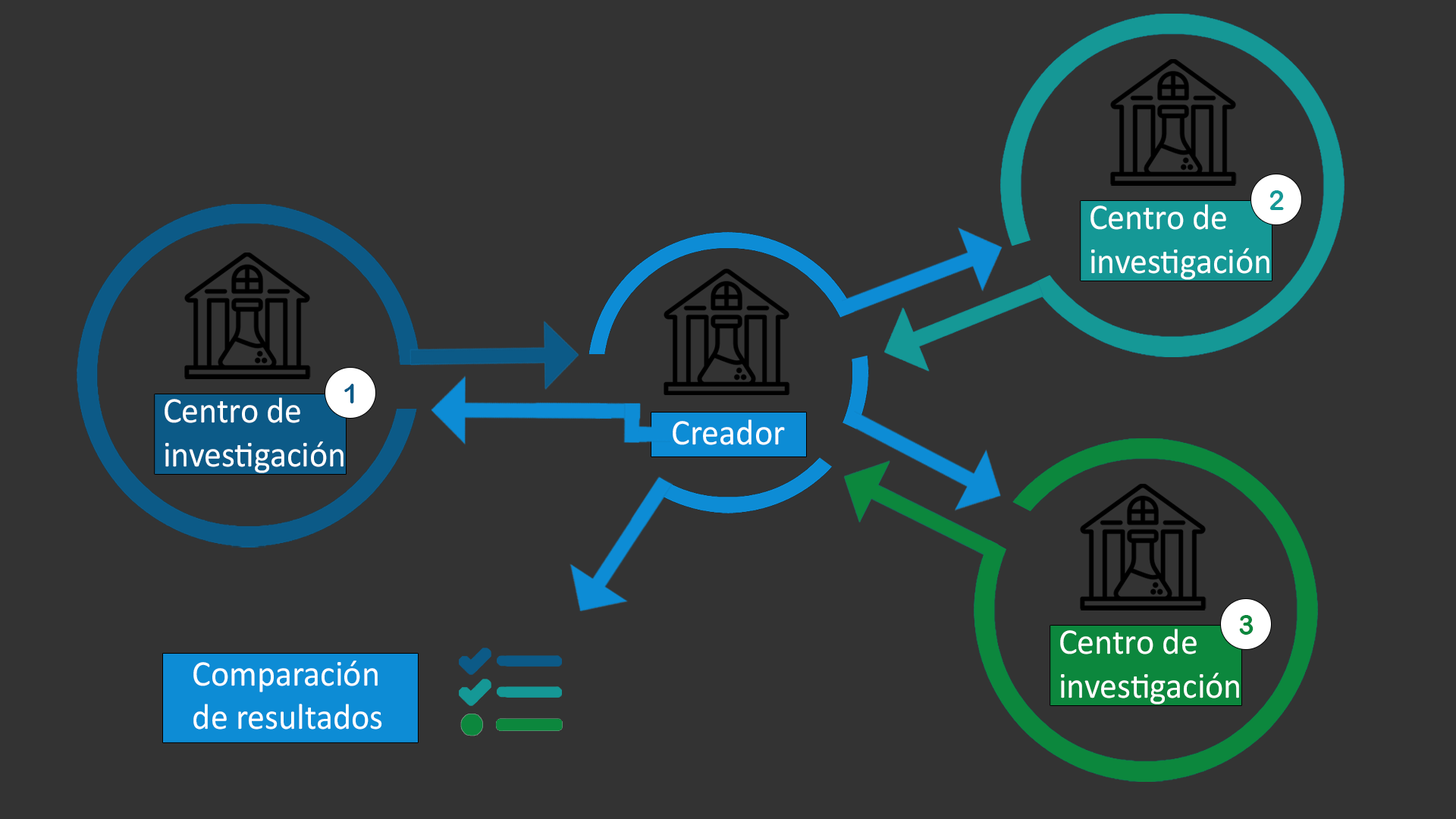
<style>
.page{position:relative;width:1456px;height:819px;background:#333333}
.page>*{position:absolute;margin:0}
.t1{font:27.9px "ArialRoundedMTBold";color:#159896;scale:0.96 1}
.t2{font:36.4px "Calibri";color:#ffffff;scale:0.96 1}
.t3{font:27.9px "ArialRoundedMTBold";color:#0c5a87;scale:0.96 1}
.t4{font:27.9px "ArialRoundedMTBold";color:#0c873d;scale:0.96 1}
</style>
<div class="page">
<p class="t1" style="left:1269px;top:190px;width:15px;height:20px">2</p>
<p class="t2" style="left:1090px;top:204px;width:179px;height:76px">Centro de <br>investigación</p>
<p class="t3" style="left:344px;top:384px;width:10px;height:19px">1</p>
<p class="t2" style="left:165px;top:397px;width:179px;height:76px">Centro de <br>investigación</p>
<p class="t2" style="left:673px;top:419px;width:112px;height:26px">Creador</p>
<p class="t4" style="left:1239px;top:615px;width:15px;height:20px">3</p>
<p class="t2" style="left:1060px;top:629px;width:179px;height:75px">Centro de <br>investigación</p>
<p class="t2" style="left:193px;top:660px;width:189px;height:70px">Comparación <br>de resultados</p>
</div>
